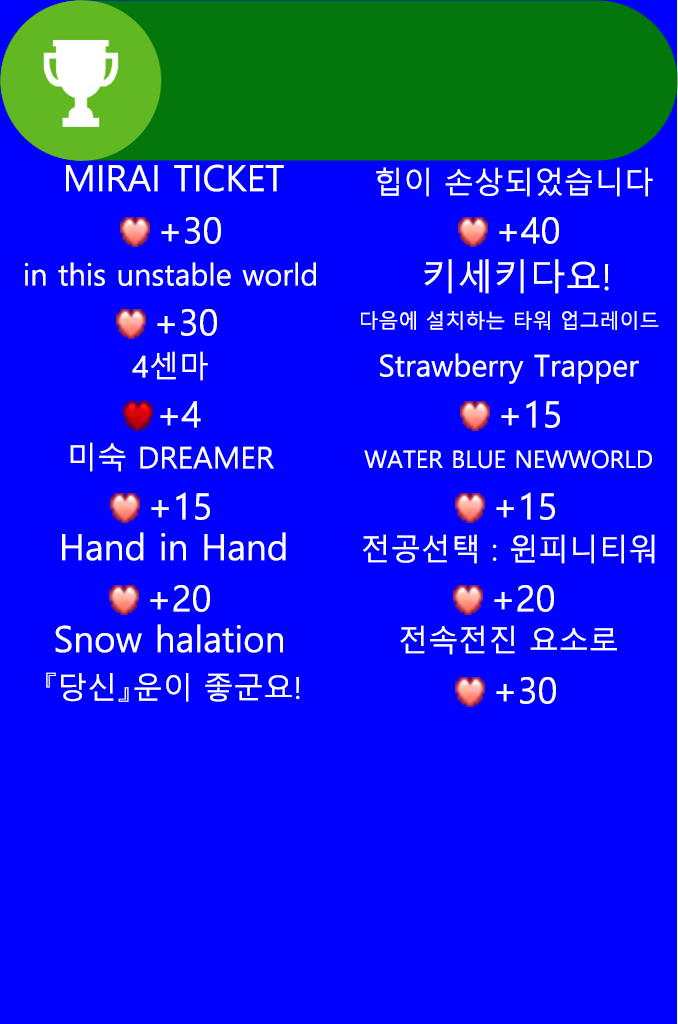
<style>
.page{position:relative;width:678px;height:1024px;background:#0000ff}
.page>*{position:absolute;margin:0}
.t1{font:36px "MalgunGothic";color:#ffffff}
.t2{font:30px "MalgunGothic";color:#ffffff}
.t3{font:20px "MalgunGothic";color:#ffffff}
.t4{font:24px "MalgunGothic";color:#ffffff}
</style>
<div class="page">
<p class="t1" style="left:66px;top:164px;width:218px;height:28px">MIRAI TICKET</p>
<p class="t2" style="left:376px;top:167px;width:277px;height:30px">힙이 손상되었습니다</p>
<p class="t1" style="left:161px;top:217px;width:60px;height:27px">+30</p>
<p class="t1" style="left:499px;top:217px;width:60px;height:27px">+40</p>
<p class="t2" style="left:24px;top:262px;width:292px;height:24px">in this unstable world</p>
<p class="t1" style="left:424px;top:259px;width:185px;height:35px">키세키다요!</p>
<p class="t1" style="left:157px;top:309px;width:60px;height:27px">+30</p>
<p class="t3" style="left:361px;top:311px;width:298px;height:19px">다음에 설치하는 타워 업그레이드</p>
<p class="t2" style="left:132px;top:351px;width:76px;height:30px">4센마</p>
<p class="t2" style="left:380px;top:353px;width:259px;height:31px">Strawberry Trapper</p>
<p class="t1" style="left:160px;top:401px;width:41px;height:27px">+4</p>
<p class="t1" style="left:501px;top:400px;width:59px;height:28px">+15</p>
<p class="t2" style="left:70px;top:442px;width:204px;height:30px">미숙 DREAMER</p>
<p class="t4" style="left:364px;top:450px;width:288px;height:19px">WATER BLUE NEWWORLD</p>
<p class="t1" style="left:151px;top:492px;width:59px;height:28px">+15</p>
<p class="t1" style="left:496px;top:492px;width:59px;height:28px">+15</p>
<p class="t1" style="left:62px;top:532px;width:224px;height:29px">Hand in Hand</p>
<p class="t2" style="left:363px;top:534px;width:292px;height:30px">전공선택 : 윈피니티워</p>
<p class="t1" style="left:150px;top:585px;width:60px;height:27px">+20</p>
<p class="t1" style="left:494px;top:585px;width:60px;height:27px">+20</p>
<p class="t1" style="left:55px;top:624px;width:228px;height:29px">Snow halation</p>
<p class="t2" style="left:400px;top:625px;width:217px;height:30px">전속전진 요소로</p>
<p class="t2" style="left:46px;top:672px;width:254px;height:30px">『당신』운이 좋군요!</p>
<p class="t1" style="left:496px;top:677px;width:60px;height:27px">+30</p>
</div>
